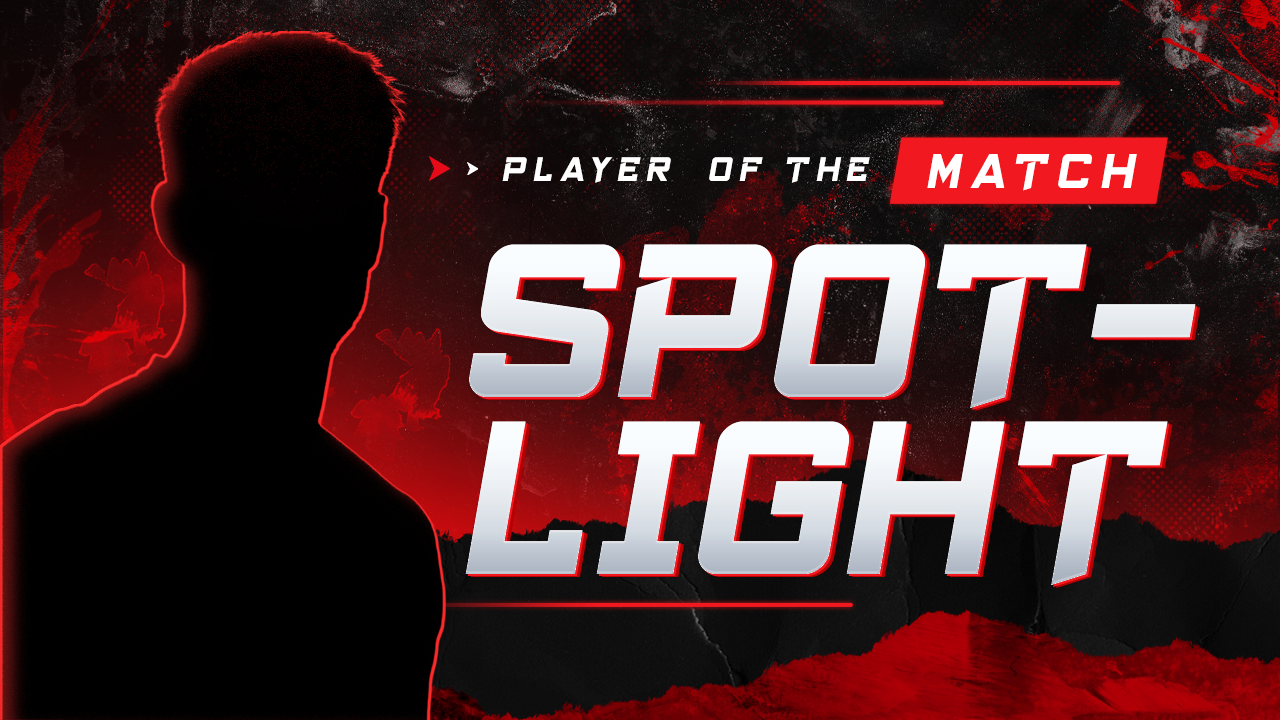
<style>
.page{position:relative;width:1280px;height:720px}
.page>*{position:absolute;margin:0}
.t1{font:35.3px "Trxdxnt";letter-spacing:0.2em;color:#ffffff}
.t2{font:50.5px "Trxdxnt";letter-spacing:0.2em;color:#ffffff}
.t3{font:226.4px "Trxdxnt";color:#e9edf1;text-transform:uppercase}
.t4{font:226.4px "Trxdxnt";text-transform:uppercase}
</style>
<div class="page">
<p class="t1" style="left:502px;top:157px;width:368px;height:26px">player  OF THE</p>
<p class="t2" style="left:927px;top:154px;width:210px;height:37px">match</p>
<p class="t3" style="left:469px;top:244px;width:727px;height:164px">SPOT-</p>
<p class="t4" style="left:465px;top:421px;width:703px;height:164px">LIGHT</p>
</div>
